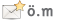
<style>
.page{position:relative;width:61px;height:21px;background:#ffffff}
.page>*{position:absolute;margin:0}
.t1{font:16px "TriplexLight";letter-spacing:0.02em;color:#6a6b6e;font-weight:bold}
</style>
<div class="page">
<p class="t1" style="left:27px;top:5px;width:26px;height:12px">ö.m</p>
</div>
